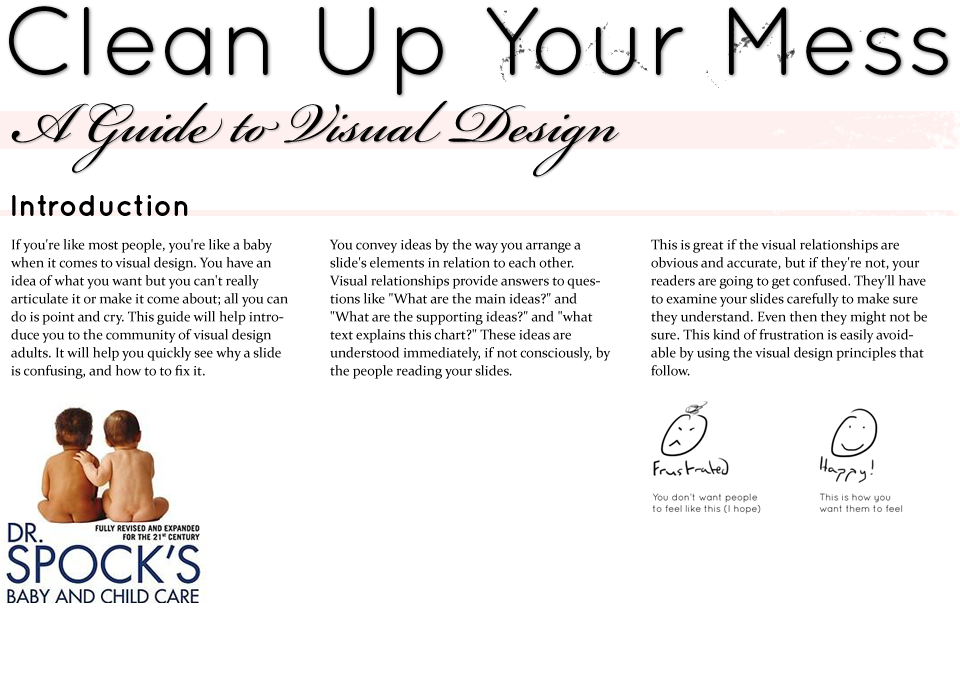
<style>
.page{position:relative;width:960px;height:700px;background:#ffffff}
.page>*{position:absolute;margin:0}
.t1{font:97px "QuicksandBook-Regular";color:#000000}
.t2{font:87px "BickhamScriptPro-Regular";color:#000000}
.t3{font:30px "QuicksandBold-Regular";color:#000000}
.t4{font:14px/18px "Constantia";color:#000000}
</style>
<div class="page">
<p class="t1" style="left:9px;top:6px;width:939px;height:89px">Clean Up Your Mess</p>
<p class="t2" style="left:11px;top:100px;width:609px;height:77px">A Guide to Visual Design</p>
<p class="t3" style="left:12px;top:195px;width:176px;height:21px">Introduction</p>
<p class="t4" style="left:11px;top:239px;width:277px;height:140px">If you're like most people, you're like a baby when it comes to visual design. You have an idea of what you want but you can't really articulate it or make it come about; all you can do is point and cry. This guide will help introduce you to the community of visual design adults. It will help you quickly see why a slide is confusing, and how to to fix it.</p>
<p class="t4" style="left:329px;top:239px;width:282px;height:140px">You convey ideas by the way you arrange a slide's elements in relation to each other. Visual relationships provide answers to questions like "What are the main ideas?" and "What are the supporting ideas?" and "what text explains this chart?" These ideas are understood immediately, if not consciously, by the people reading your slides.</p>
<p class="t4" style="left:651px;top:239px;width:276px;height:137px">This is great if the visual relationships are obvious and accurate, but if they're not, your readers are going to get confused. They'll have to examine your slides carefully to make sure they understand. Even then they might not be sure. This kind of frustration is easily avoidable by using the visual design principles that follow.</p>
</div>
